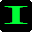
<style>
.page{position:relative;width:32px;height:32px;background:#000000}
.page>*{position:absolute;margin:0}
.t1{font:24.9px "Georgia";color:#00fd36;scale:2.9 1}
</style>
<div class="page">
<p class="t1" style="left:4px;top:6px;width:24px;height:18px">I</p>
</div>
